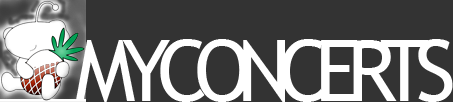
<style>
.page{position:relative;width:453px;height:102px;background:#333333}
.page>*{position:absolute;margin:0}
.t1{font:85px "TrebuchetMS";letter-spacing:-0.16em;color:#ffffff}
</style>
<div class="page">
<p class="t1" style="left:75px;top:39px;width:378px;height:63px">MYCONCERTS</p>
</div>
